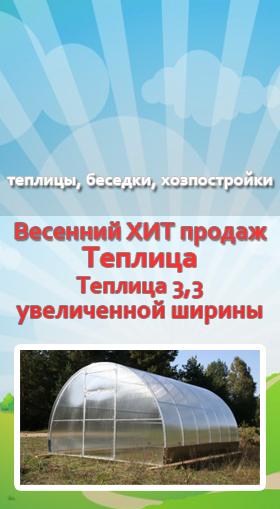
<style>
.page{position:relative;width:280px;height:509px}
.page>*{position:absolute;margin:0}
.t1{font:18px "Corbel-Bold";color:#ffffff}
.t2{font:25px "Corbel-Bold";color:#fe3232}
.t3{font:25.5px/25.5px "Corbel-Bold";color:#f92d2d}
.t4{font:30.5px/40.7px "Corbel-Bold";color:#f92d2d}
.t5{font:24px/25.5px "Corbel-Bold";color:#f92d2d}
</style>
<div class="page">
<p class="t1" style="left:7px;top:171px;width:265px;height:18px">теплицы, беседки, хозпостройки</p>
<p class="t2" style="left:15px;top:222px;width:252px;height:23px">Весенний ХИТ продаж</p>
<p class="t3" style="left:16px;top:247px;width:246px;height:77px;text-align:center"><span class="t4">Теплица <br></span><span class="t5">Теплица 3,3<br></span>увеличенной ширины</p>
</div>
